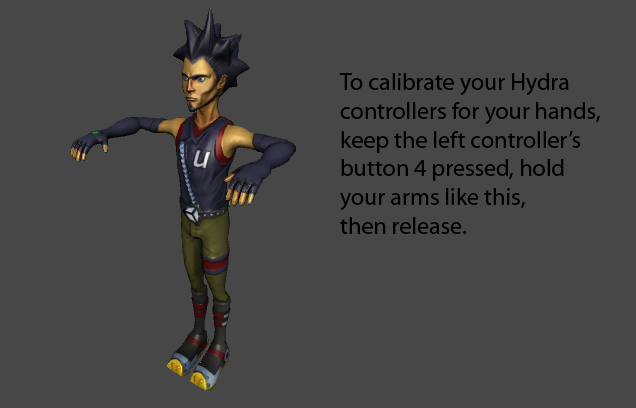
<style>
.page{position:relative;width:636px;height:408px;background:#474747}
.page>*{position:absolute;margin:0}
.t1{font:24px "MyriadPro-Regular";color:#000000}
</style>
<div class="page">
<p class="t1" style="left:339px;top:73px;width:261px;height:161px">To calibrate your Hydra<br>controllers for your hands,<br>keep the left controller’s<br>button 4 pressed, hold<br>your arms like this,<br>then release.</p>
</div>
